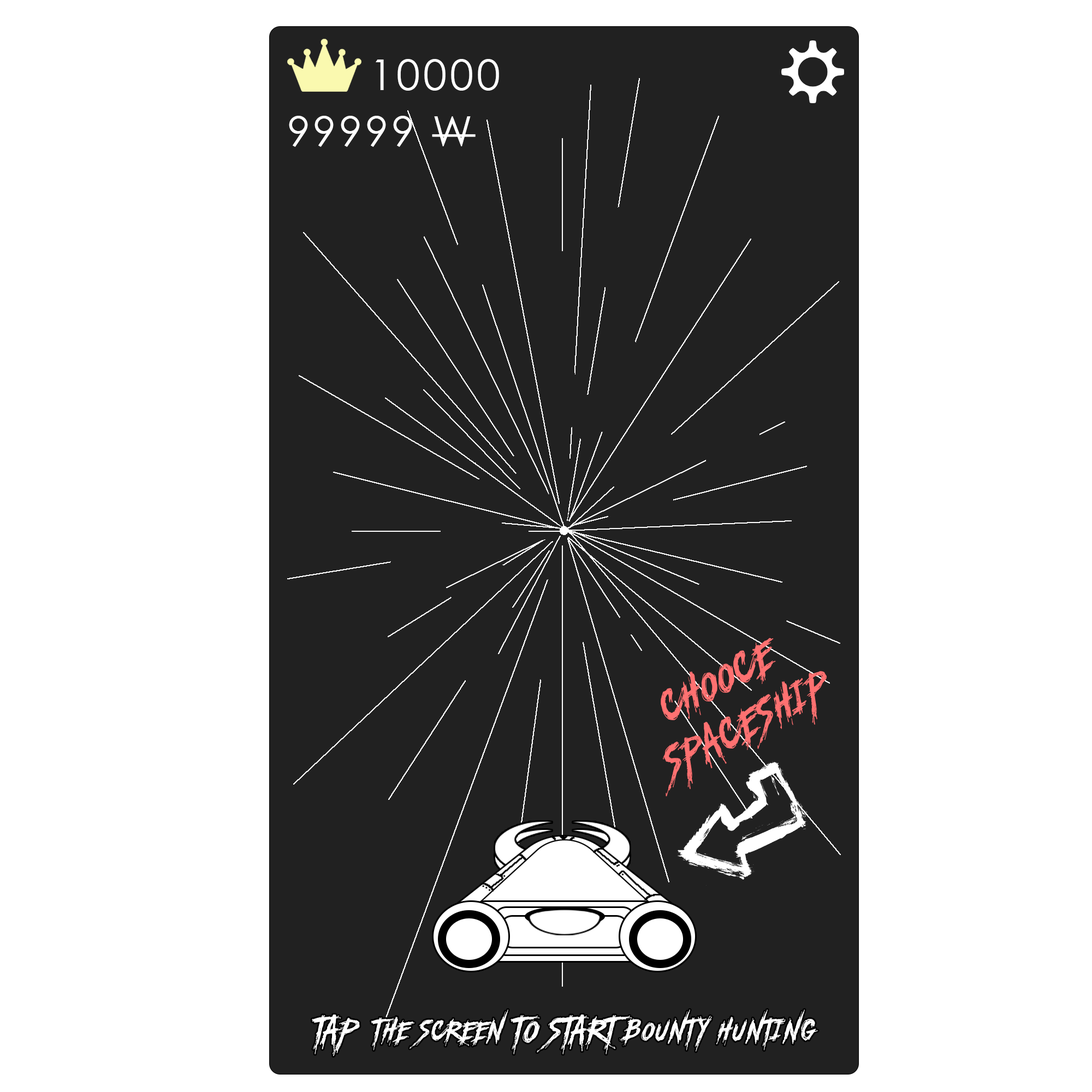
<style>
.page{position:relative;width:1092px;height:1092px;background:#ffffff}
.page>*{position:absolute;margin:0}
.t1{font:42.5px "CenturyGothic";letter-spacing:0.075em;color:#ffffff}
.t2{font:41.6px "CenturyGothic";letter-spacing:0.075em;color:#ffffff}
.t3{font:64.8px/51.8px "AnotherAmericaRUSBYLYAJKA";letter-spacing:0.075em;color:#ff7171}
.t4{font:42.9px "AnotherAmericaRUSBYLYAJKA";letter-spacing:0.075em;color:#ffffff}
</style>
<div class="page">
<p class="t1" style="left:376px;top:59px;width:123px;height:32px">10000</p>
<p class="t2" style="left:289px;top:116px;width:187px;height:31px">99999 W</p>
<p class="t3" style="left:661px;top:638px;width:166px;height:159px;text-align:center;rotate:-27deg">chooce <br>spaceship</p>
<p class="t4" style="left:312px;top:1010px;width:506px;height:46px">TAP  the screen TO START bounty hunting</p>
</div>
